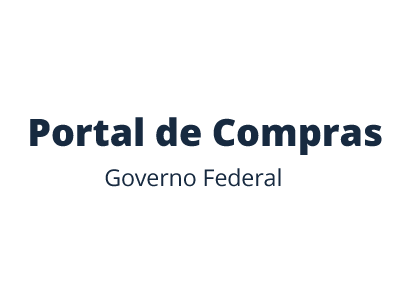
<style>
.page{position:relative;width:400px;height:300px;background:#ffffff}
.page>*{position:absolute;margin:0}
.t1{font:37.8px "OpenSans-Extrabold";letter-spacing:-0.005em;color:#172a40}
.t2{font:23.2px "OpenSans";letter-spacing:-0.005em;color:#172a40}
</style>
<div class="page">
<p class="t1" style="left:30px;top:117px;width:352px;height:38px">Portal de Compras</p>
<p class="t2" style="left:105px;top:168px;width:176px;height:19px">Governo Federal</p>
</div>
